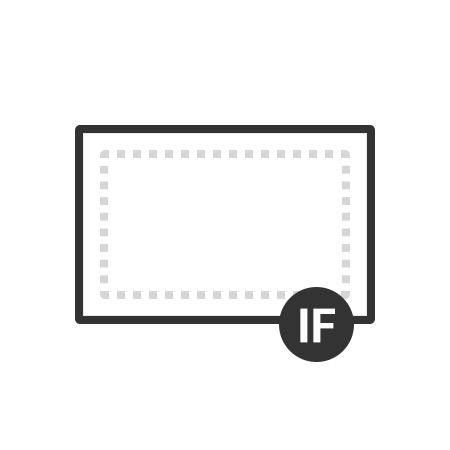
<style>
.page{position:relative;width:450px;height:450px;background:#ffffff}
.page>*{position:absolute;margin:0}
.t1{font:47px "Roboto-Bold";color:#ffffff}
</style>
<div class="page">
<p class="t1" style="left:300px;top:308px;width:35px;height:35px">IF</p>
</div>
